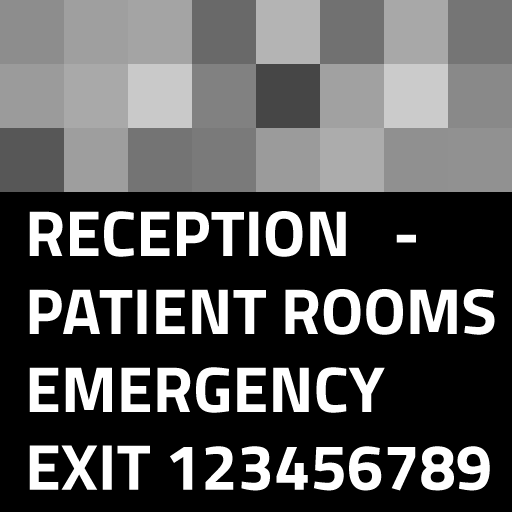
<style>
.page{position:relative;width:512px;height:512px;background:#000000}
.page>*{position:absolute;margin:0}
.t1{font:64.9px "Titillium-Bold";color:#ffffff}
</style>
<div class="page">
<p class="t1" style="left:29px;top:211px;width:466px;height:280px">RECEPTION   - <br>PATIENT ROOMS<br>EMERGENCY<br>EXIT 123456789</p>
</div>
